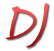
<style>
.page{position:relative;width:54px;height:51px;background:#ffffff}
.page>*{position:absolute;margin:0}
.t1{font:58px "Journal";letter-spacing:-0.025em}
</style>
<div class="page">
<p class="t1" style="left:5px;top:3px;width:44px;height:45px">DJ</p>
</div>
